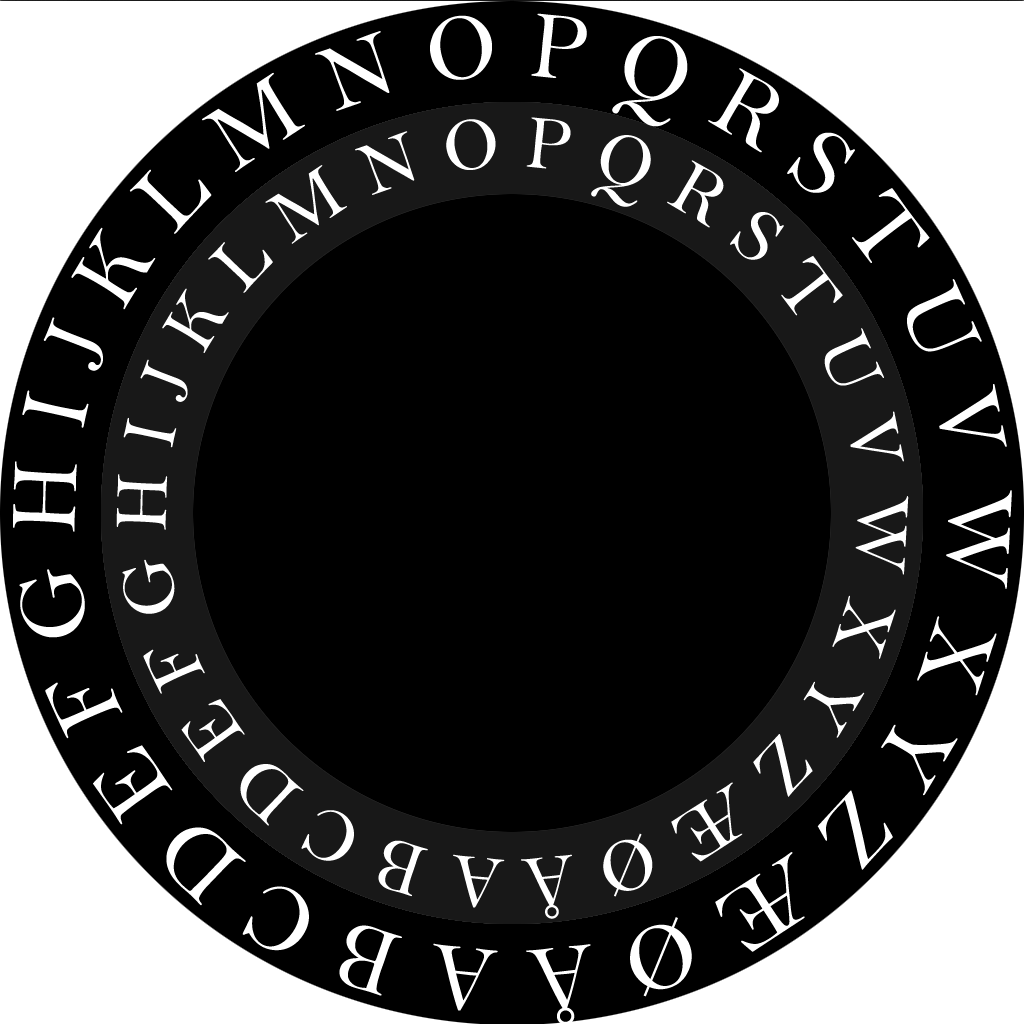
<style>
.page{position:relative;width:1024px;height:1024px;background:#000000}
.page>*{position:absolute;margin:0}
.t1{font:77px/97px "BellMT";letter-spacing:0.279em;color:#ffffff}
</style>
<div class="page">
<p class="t1" style="left:116px;top:116px;width:793px;height:802px;text-align:center">ABCDEFGHIJKLMNOPQRSTUVWXYZÆØÅ</p>
</div>
